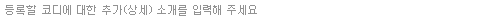
<style>
.page{position:relative;width:500px;height:20px;background:#ffffff}
.page>*{position:absolute;margin:0}
.t1{font:12px "morris9";color:#929292;scale:0.96 1}
</style>
<div class="page">
<p class="t1" style="left:5px;top:5px;width:252px;height:11px">등록할 코디에 대한 추가(상세) 소개를 입력해 주세요</p>
</div>
